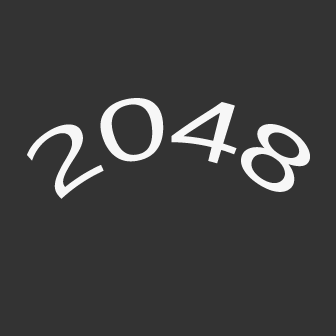
<style>
.page{position:relative;width:336px;height:336px;background:#333333}
.page>*{position:absolute;margin:0}
.t1{font:86px "SegoeWP";color:#f7f7f8}
</style>
<div class="page">
<p class="t1" style="left:27px;top:98px;width:283px;height:101px">2048</p>
</div>
